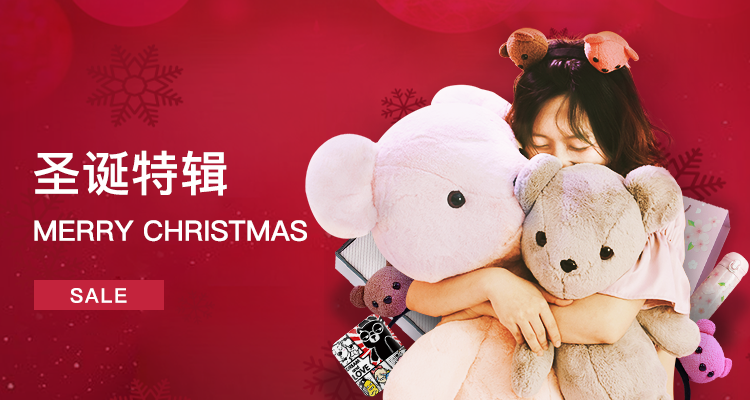
<style>
.page{position:relative;width:750px;height:400px}
.page>*{position:absolute;margin:0}
.t1{font:48px "PingFangSC-Medium";letter-spacing:0.025em;color:#ffffff;text-transform:uppercase}
.t2{font:28px "PingFangSC-Medium";color:#ffffff;text-transform:uppercase}
.t3{font:20px "PingFangSC-Medium";letter-spacing:0.1em;color:#ffffff;text-transform:uppercase}
</style>
<div class="page">
<p class="t1" style="left:34px;top:150px;width:193px;height:46px">圣诞特辑</p>
<p class="t2" style="left:34px;top:220px;width:273px;height:22px">merry christmas</p>
<p class="t3" style="left:70px;top:288px;width:57px;height:15px">SAlE</p>
</div>
